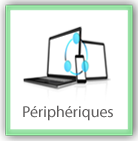
<style>
.page{position:relative;width:138px;height:141px;background:#ffffff}
.page>*{position:absolute;margin:0}
.t1{font:15.9px "MyriadPro-Regular";color:#615f5f}
</style>
<div class="page">
<p class="t1" style="left:23px;top:105px;width:90px;height:16px">Périphériques</p>
</div>
